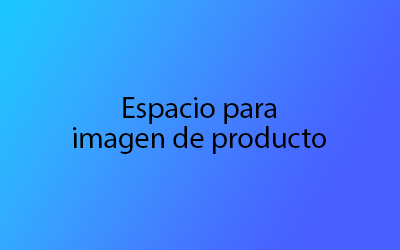
<style>
.page{position:relative;width:400px;height:250px}
.page>*{position:absolute;margin:0}
.t1{font:30px/30px "MyriadPro-Regular";color:#000000}
</style>
<div class="page">
<p class="t1" style="left:73px;top:97px;width:253px;height:57px;text-align:center">Espacio para<br>imagen de producto</p>
</div>
